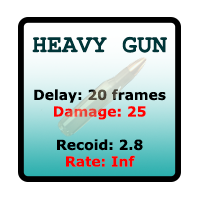
<style>
.page{position:relative;width:200px;height:200px;background:#ffffff}
.page>*{position:absolute;margin:0}
.t1{font:25px "CourierNewPS-BoldMT";color:#003538}
.t2{font:13.9px "Verdana-Bold";color:#000000}
.t3{font:13.9px "Verdana-Bold";color:#ff0000}
</style>
<div class="page">
<p class="t1" style="left:32px;top:36px;width:135px;height:17px">HEAVY GUN</p>
<p class="t2" style="left:34px;top:89px;width:132px;height:78px;text-align:center">Delay: 20 frames<br><span class="t3">Damage: 25<br></span><br>Recoid: 2.8<br><span class="t3">Rate: Inf</span></p>
</div>
